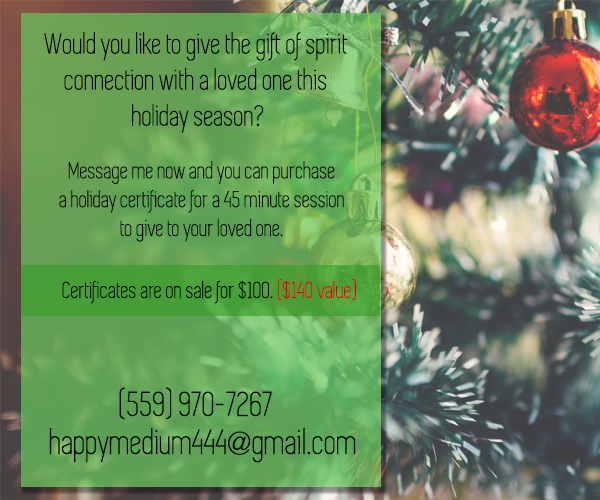
<style>
.page{position:relative;width:600px;height:500px}
.page>*{position:absolute;margin:0}
.t1{font:30px "Simplifica";color:#000000}
.t2{font:24px "Simplifica";color:#000000}
.t3{font:24px "Simplifica";color:#e00000}
.t4{font:36px "Simplifica";color:#000000}
</style>
<div class="page">
<p class="t1" style="left:44px;top:32px;width:304px;height:101px;text-align:center">Would you like to give the gift of spirit <br>connection with a loved one this <br>holiday season?</p>
<p class="t2" style="left:59px;top:161px;width:285px;height:81px;text-align:center">Message me now and you can purchase<br>a holiday certificate for a 45 minute session<br>to give to your loved one.</p>
<p class="t2" style="left:62px;top:278px;width:294px;height:26px">Certificates are on sale for $100. <span class="t3">($140 value)</span></p>
<p class="t4" style="left:119px;top:387px;width:153px;height:33px">(559) 970-7267</p>
<p class="t4" style="left:49px;top:428px;width:307px;height:35px">happymedium444@gmail.com</p>
</div>
